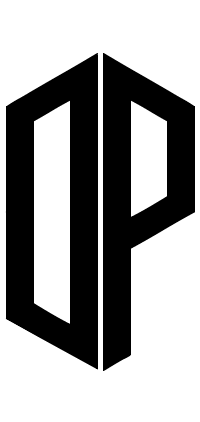
<style>
.page{position:relative;width:200px;height:422px;background:#ffffff}
.page>*{position:absolute;margin:0}
.t1{font:250px "Cubic";letter-spacing:0.06em;color:#000000}
</style>
<div class="page">
<p class="t1" style="left:103px;top:53px;width:92px;height:318px">P</p>
</div>
